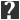
<style>
.page{position:relative;width:20px;height:20px;background:#333333}
.page>*{position:absolute;margin:0}
.t1{font:26.4px "Cambria-Bold";color:#ffffff}
</style>
<div class="page">
<p class="t1" style="left:4px;top:1px;width:11px;height:19px">?</p>
</div>
